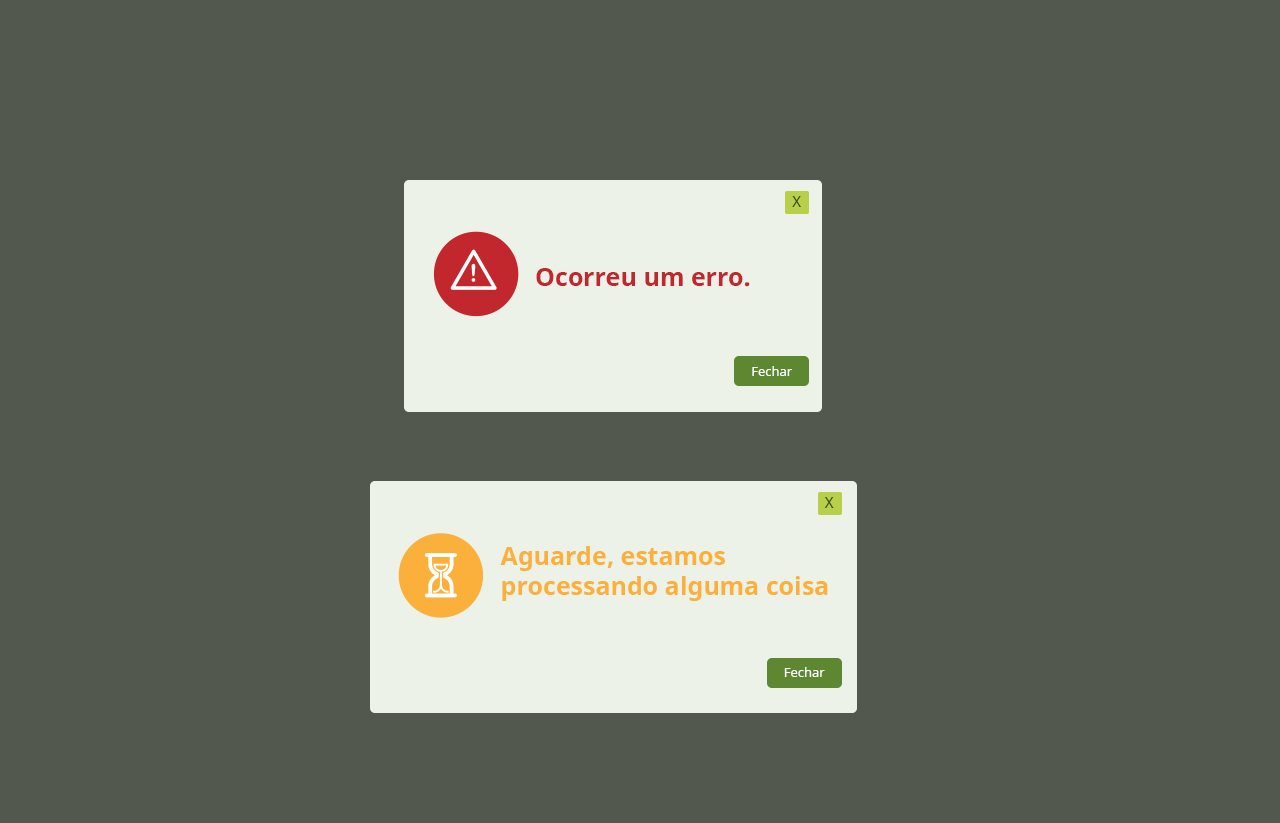
<style>
.page{position:relative;width:1280px;height:823px;background:#53584e}
.page>*{position:absolute;margin:0}
.t1{font:15px "NotoSans";color:#324a1a}
.t2{font:25px "NotoSans-Bold";color:#c1272d}
.t3{font:13px "NotoSans";color:#ffffff}
.t4{font:25px "NotoSans-Bold";color:#fbb03b}
</style>
<div class="page">
<p class="t1" style="left:792px;top:196px;width:9px;height:11px">X</p>
<p class="t2" style="left:536px;top:268px;width:214px;height:19px">Ocorreu um erro.</p>
<p class="t3" style="left:752px;top:366px;width:40px;height:10px">Fechar</p>
<p class="t1" style="left:824px;top:497px;width:10px;height:11px">X</p>
<p class="t4" style="left:500px;top:546px;width:328px;height:55px">Aguarde, estamos processando alguma coisa</p>
<p class="t3" style="left:784px;top:667px;width:41px;height:10px">Fechar</p>
</div>
